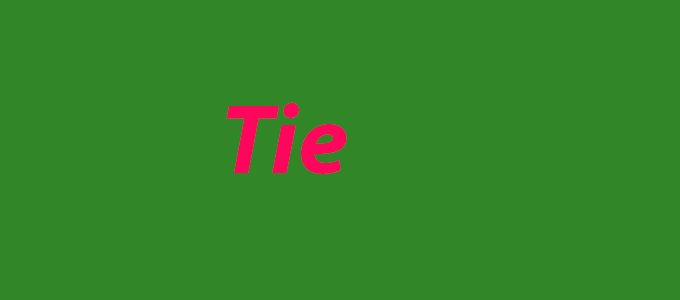
<style>
.page{position:relative;width:680px;height:300px;background:#318727}
.page>*{position:absolute;margin:0}
.t1{font:100px "MyriadPro-BoldIt";color:#fd075d}
</style>
<div class="page">
<p class="t1" style="left:226px;top:102px;width:121px;height:72px">Tie</p>
</div>
